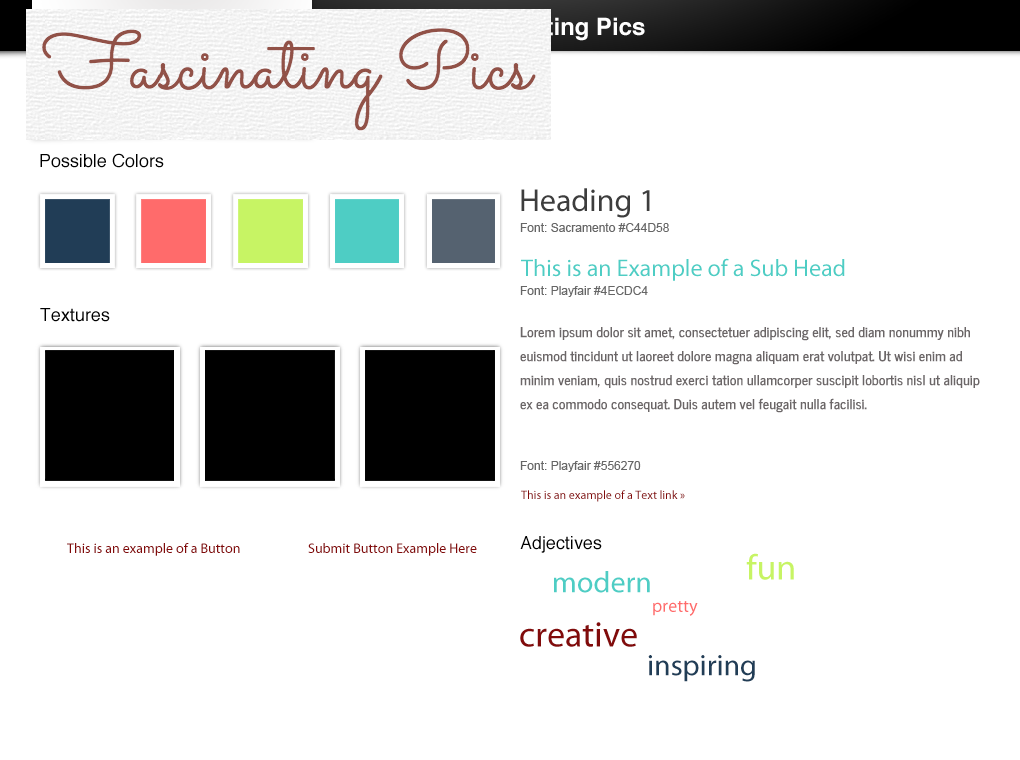
<style>
.page{position:relative;width:1020px;height:760px;background:#ffffff}
.page>*{position:absolute;margin:0}
.t1{font:18px "Helvetica";color:#000000}
.t2{font:32px "MyriadPro-Regular";color:#3d3d3d}
.t3{font:12px "ArialMT";color:#666666}
.t4{font:24px "MyriadPro-Regular";color:#4ecdc4}
.t5{font:14px/24px "NewsCycle";color:#6b6667}
.t6{font:12px "MyriadPro-Regular";color:#810b0b}
.t7{font:14px "MyriadPro-Regular";color:#810b0b}
.t8{font:36px "MyriadPro-Regular";color:#c7f464}
.t9{font:30px "MyriadPro-Regular";color:#4ecdc4}
.t10{font:18px "MyriadPro-Regular";color:#ff6b6b}
.t11{font:36px "MyriadPro-Regular";color:#810b0b}
.t12{font:30px "MyriadPro-Regular";color:#213d56}
</style>
<div class="page">
<p class="t1" style="left:40px;top:153px;width:124px;height:15px">Possible Colors</p>
<p class="t2" style="left:521px;top:188px;width:129px;height:30px">Heading 1</p>
<p class="t3" style="left:520px;top:223px;width:149px;height:9px">Font: Sacramento #C44D58</p>
<p class="t4" style="left:521px;top:258px;width:324px;height:23px">This is an Example of a Sub Head</p>
<p class="t3" style="left:520px;top:286px;width:128px;height:11px">Font: Playfair #4ECDC4</p>
<p class="t1" style="left:40px;top:308px;width:70px;height:14px">Textures</p>
<p class="t5" style="left:520px;top:327px;width:460px;height:86px">Lorem ipsum dolor sit amet, consectetuer adipiscing elit, sed diam nonummy nibh euismod tincidunt ut laoreet dolore magna aliquam erat volutpat. Ut wisi enim ad minim veniam, quis nostrud exerci tation ullamcorper suscipit lobortis nisl ut aliquip ex ea commodo consequat. Duis autem vel feugait nulla facilisi.</p>
<p class="t3" style="left:520px;top:461px;width:121px;height:11px">Font: Playfair #556270</p>
<p class="t6" style="left:521px;top:490px;width:164px;height:12px">This is an example of a Text link »</p>
<p class="t7" style="left:67px;top:543px;width:173px;height:13px">This is an example of a Button</p>
<p class="t7" style="left:308px;top:543px;width:169px;height:13px">Submit Button Example Here</p>
<p class="t1" style="left:520px;top:536px;width:82px;height:17px">Adjectives</p>
<p class="t8" style="left:746px;top:553px;width:48px;height:27px">fun</p>
<p class="t9" style="left:554px;top:571px;width:96px;height:22px">modern</p>
<p class="t10" style="left:653px;top:601px;width:45px;height:15px">pretty</p>
<p class="t11" style="left:520px;top:622px;width:117px;height:25px">creative</p>
<p class="t12" style="left:648px;top:655px;width:107px;height:27px">inspiring</p>
</div>
